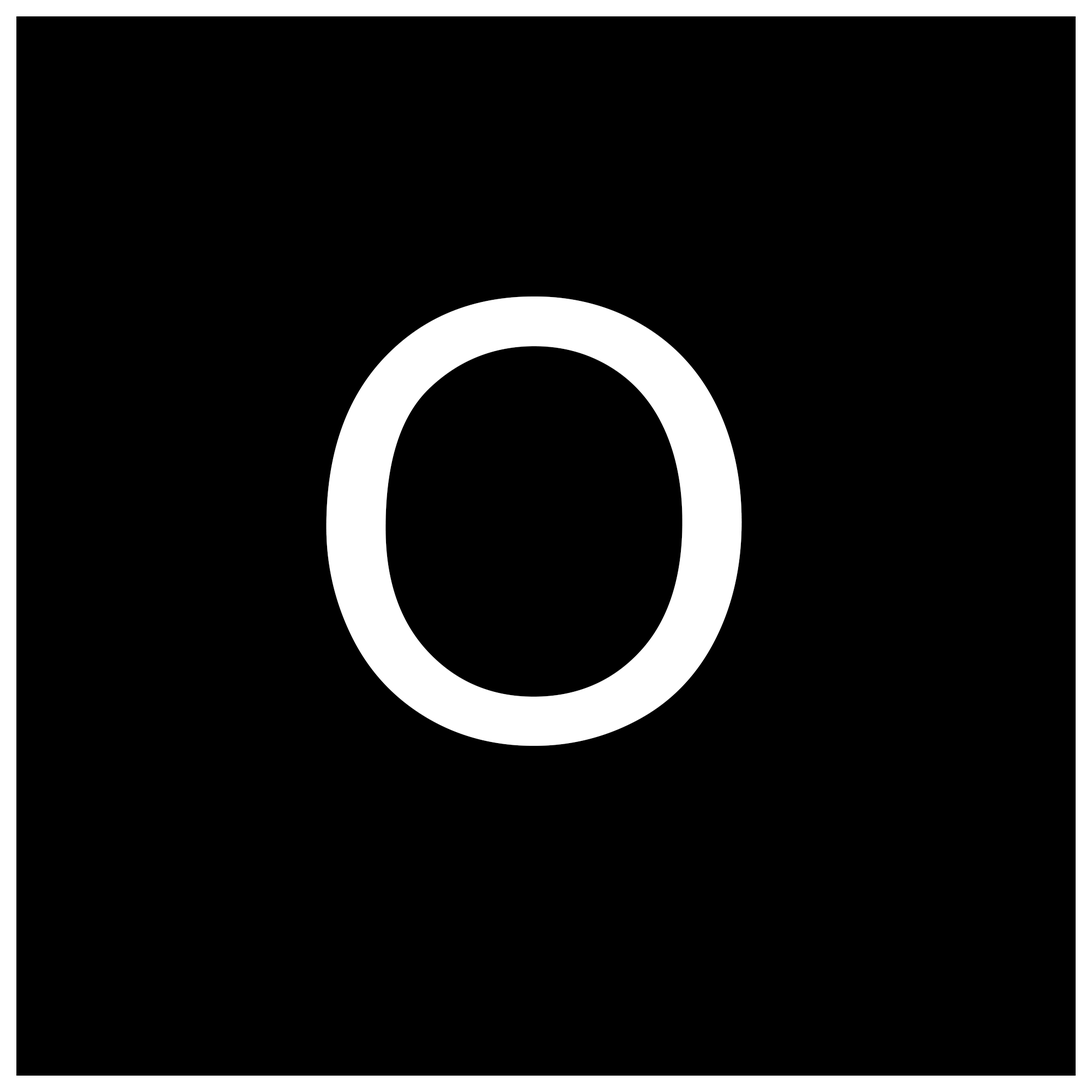
<style>
.page{position:relative;width:1092px;height:1092px;background:#000000}
.page>*{position:absolute;margin:0}
.t1{font:606.7px "ArialMT";color:#ffffff}
</style>
<div class="page">
<p class="t1" style="left:326px;top:296px;width:416px;height:450px">O</p>
</div>
